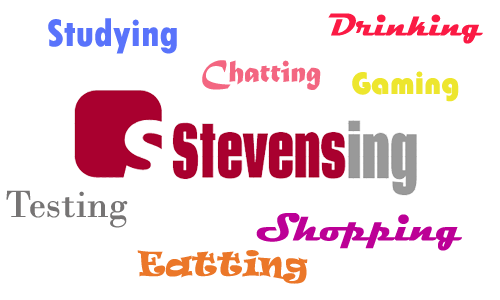
<style>
.page{position:relative;width:500px;height:300px;background:#ffffff}
.page>*{position:absolute;margin:0}
.t1{font:32px "Magneto-Bold";color:#fb1a44}
.t2{font:40px "TwCenMT-CondensedExtraBold";color:#5973fb}
.t3{font:32px "MaturaMTScriptCapitals";color:#f36681}
.t4{font:32px "Bauhaus93";color:#ede62e}
.t5{font:40px "BodoniMT";color:#767474}
.t6{font:40px "Magneto-Bold";color:#bc0096}
.t7{font:32px "Ravie";color:#eb7729}
</style>
<div class="page">
<p class="t1" style="left:328px;top:13px;width:155px;height:31px">Drinking</p>
<p class="t2" style="left:48px;top:18px;width:129px;height:36px">Studying</p>
<p class="t3" style="left:202px;top:60px;width:119px;height:30px">Chatting</p>
<p class="t4" style="left:352px;top:71px;width:107px;height:31px">Gaming</p>
<p class="t5" style="left:6px;top:190px;width:122px;height:38px">Testing</p>
<p class="t6" style="left:256px;top:213px;width:206px;height:38px">Shopping</p>
<p class="t7" style="left:137px;top:250px;width:171px;height:34px">Eatting</p>
</div>
